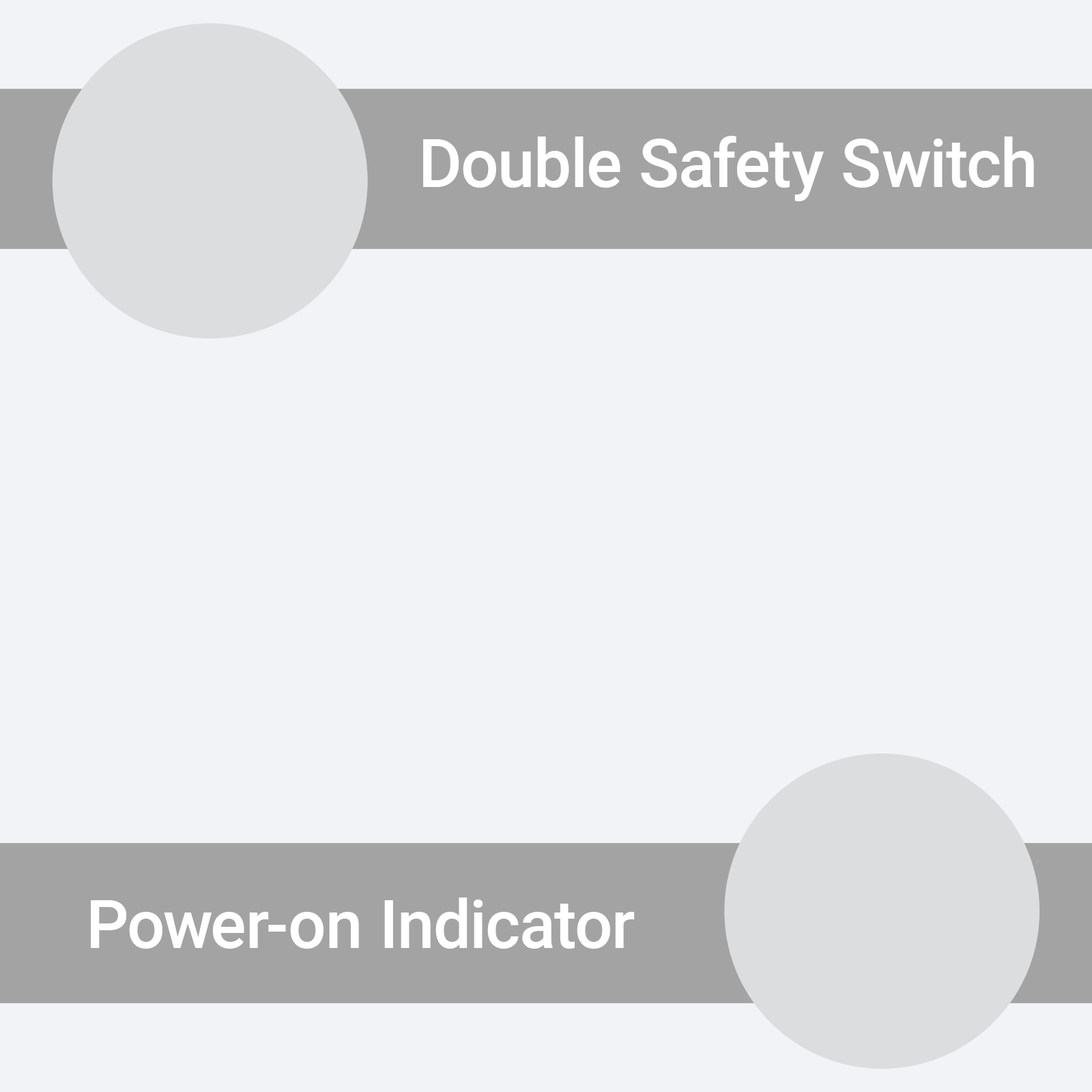
<style>
.page{position:relative;width:1092px;height:1092px;background:#f2f3f6}
.page>*{position:absolute;margin:0}
.t1{font:67px "Roboto-Medium";color:#ffffff}
</style>
<div class="page">
<p class="t1" style="left:423px;top:136px;width:611px;height:65px">Double Safety Switch</p>
<p class="t1" style="left:91px;top:897px;width:544px;height:52px">Power-on Indicator</p>
</div>
